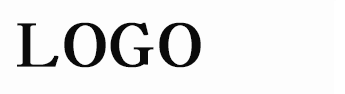
<style>
.page{position:relative;width:345px;height:94px;background:#fdfdfd}
.page>*{position:absolute;margin:0}
.t1{font:64px "SimSun";color:#0b0b0b;font-weight:bold;scale:1.4 1}
</style>
<div class="page">
<p class="t1" style="left:17px;top:22px;width:184px;height:46px">LOGO</p>
</div>
